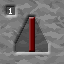
<style>
.page{position:relative;width:64px;height:64px;background:#767676}
.page>*{position:absolute;margin:0}
.t1{font:9px "Consolas";letter-spacing:-0.02em;color:#ffffff}
</style>
<div class="page">
<p class="t1" style="left:9px;top:8px;width:3px;height:6px">1</p>
</div>
